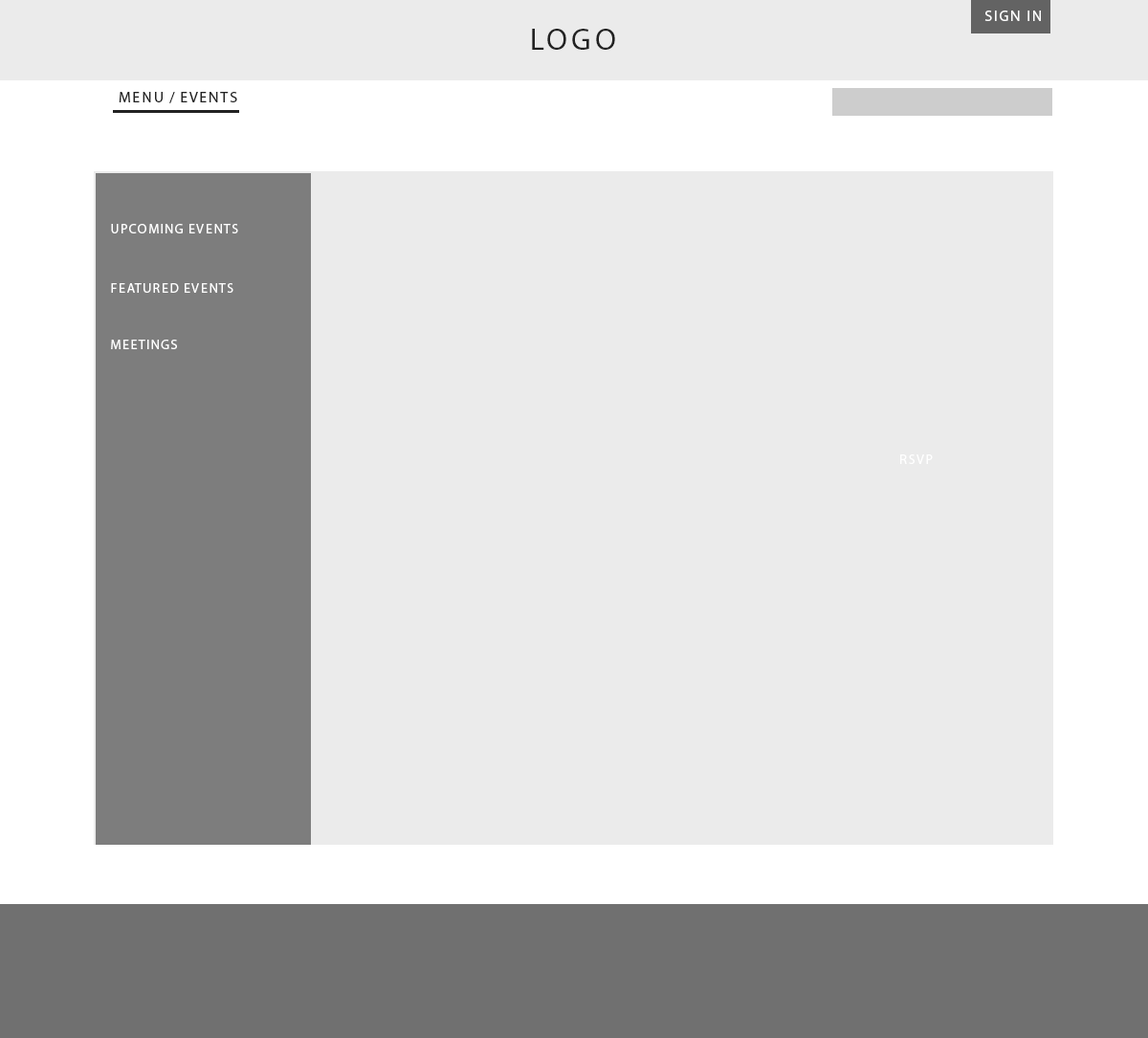
<style>
.page{position:relative;width:1148px;height:1038px;background:#ebebeb}
.page>*{position:absolute;margin:0}
.t1{font:15.3px "MyriadPro-Regular";letter-spacing:0.1em;color:#ffffff;text-transform:uppercase}
.t2{font:30.6px "MyriadPro-Regular";letter-spacing:0.12em;color:#222222;text-transform:uppercase}
.t3{font:15.3px "MyriadPro-Regular";letter-spacing:0.1em;color:#222222;text-transform:uppercase}
.t4{font:13.4px "MyriadPro-Regular";letter-spacing:0.1em;color:#ffffff;text-transform:uppercase}
</style>
<div class="page">
<p class="t1" style="left:985px;top:11px;width:56px;height:10px">Sign in</p>
<p class="t2" style="left:532px;top:29px;width:83px;height:21px">LOGO</p>
<p class="t3" style="left:119px;top:92px;width:118px;height:11px">MENU / EVENTS</p>
<p class="t4" style="left:111px;top:224px;width:127px;height:10px">Upcoming Events</p>
<p class="t4" style="left:111px;top:283px;width:123px;height:10px">Featured events</p>
<p class="t4" style="left:111px;top:340px;width:66px;height:9px">Meetings</p>
<p class="t4" style="left:901px;top:455px;width:32px;height:9px">rsvp</p>
</div>
